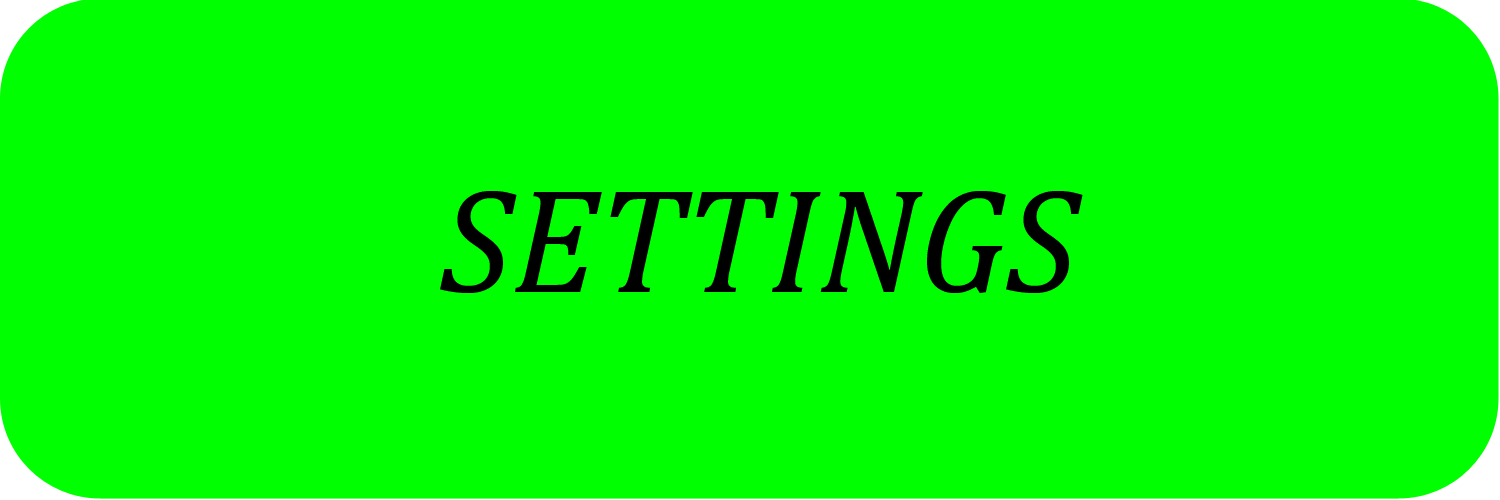
<style>
.page{position:relative;width:1500px;height:500px;background:#00ff00}
.page>*{position:absolute;margin:0}
.t1{font:150px "Cambria-Italic";color:#000000}
</style>
<div class="page">
<p class="t1" style="left:440px;top:191px;width:643px;height:102px">SETTINGS</p>
</div>
